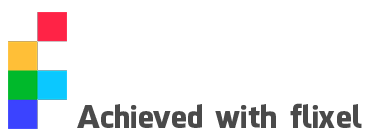
<style>
.page{position:relative;width:370px;height:137px;background:#ffffff}
.page>*{position:absolute;margin:0}
.t1{font:30.9px "FacebookLetterFaces";color:#4a4a4a}
</style>
<div class="page">
<p class="t1" style="left:77px;top:103px;width:285px;height:25px">Achieved with flixel</p>
</div>
